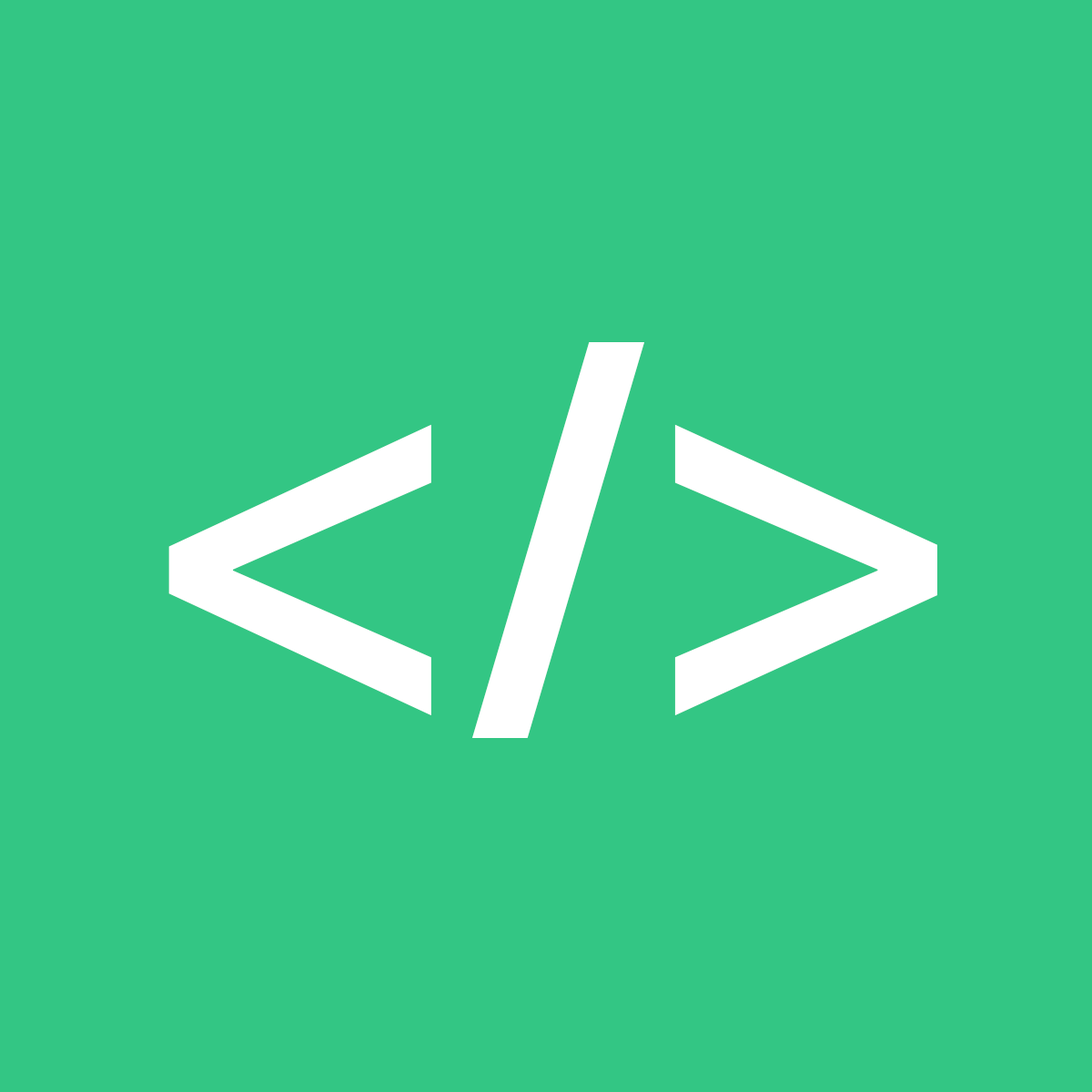
<style>
.page{position:relative;width:1092px;height:1092px;background:#33c684}
.page>*{position:absolute;margin:0}
.t1{font:546px "MyriadHebrew-Bold";color:#ffffff}
</style>
<div class="page">
<p class="t1" style="left:168px;top:342px;width:769px;height:396px">&lt;/&gt;</p>
</div>
